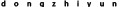
<style>
.page{position:relative;width:120px;height:7px;background:#ffffff}
.page>*{position:absolute;margin:0}
.t1{font:6.7px "MicrosoftYaHei";letter-spacing:1.259em;color:#000000;font-weight:bold}
</style>
<div class="page">
<p class="t1" style="left:1px;top:0px;width:116px;height:8px">dongzhiyun</p>
</div>
